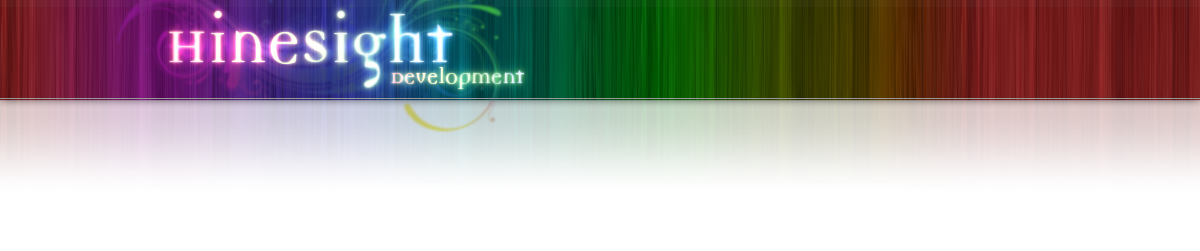
<style>
.page{position:relative;width:1200px;height:251px;background:#ffffff}
.page>*{position:absolute;margin:0}
.t1{font:72px "DemocraticaRegular";color:#ffffff}
.t2{font:24px "DemocraticaRegular";color:#eef7eb}
</style>
<div class="page">
<p class="t1" style="left:169px;top:11px;width:284px;height:77px;opacity:0.79">HineSight</p>
<p class="t2" style="left:391px;top:67px;width:133px;height:22px">Development</p>
</div>
